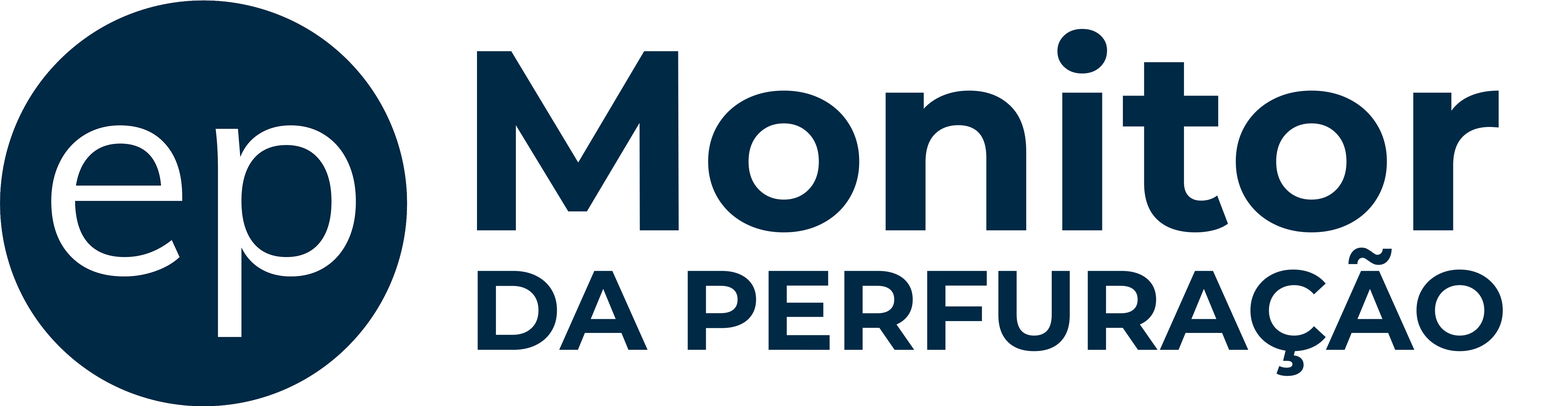
<style>
.page{position:relative;width:1568px;height:406px;background:#ffffff}
.page>*{position:absolute;margin:0}
.t1{font:255.6px "Montserrat-Bold";color:#002945}
.t2{font:112.5px "Montserrat-Bold";color:#002945}
</style>
<div class="page">
<p class="t1" style="left:477px;top:29px;width:1022px;height:203px">Monitor</p>
<p class="t2" style="left:477px;top:247px;width:1026px;height:129px">DA PERFURAÇÃO</p>
</div>
